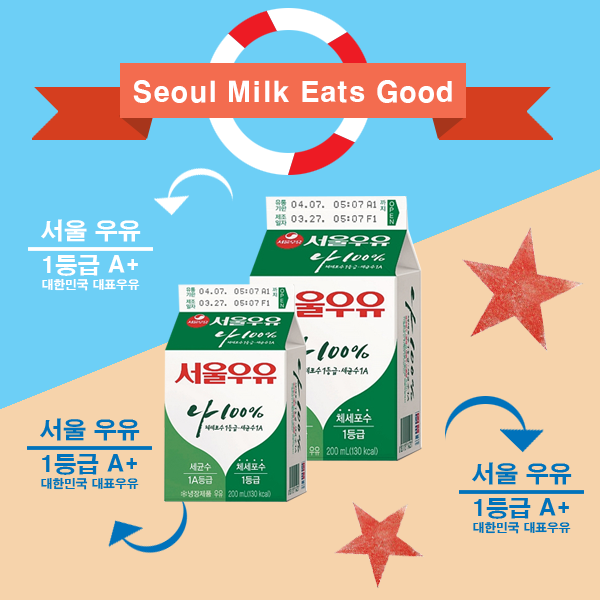
<style>
.page{position:relative;width:600px;height:600px;background:#f6d3ab}
.page>*{position:absolute;margin:0}
.t1{font:27.8px "H2gtrE";color:#ffffff}
.t2{font:23.3px "H2gtrE";color:#ffffff}
.t3{font:22.7px "H2gtrE";color:#ffffff}
.t4{font:12px "H2gtrE";color:#ffffff}
</style>
<div class="page">
<p class="t1" style="left:133px;top:80px;width:319px;height:23px">Seoul Milk Eats Good</p>
<p class="t2" style="left:41px;top:219px;width:100px;height:23px">서울 우유</p>
<p class="t3" style="left:43px;top:255px;width:95px;height:21px">1등급 A+</p>
<p class="t4" style="left:42px;top:278px;width:98px;height:13px">대한민국 대표우유</p>
</div>
